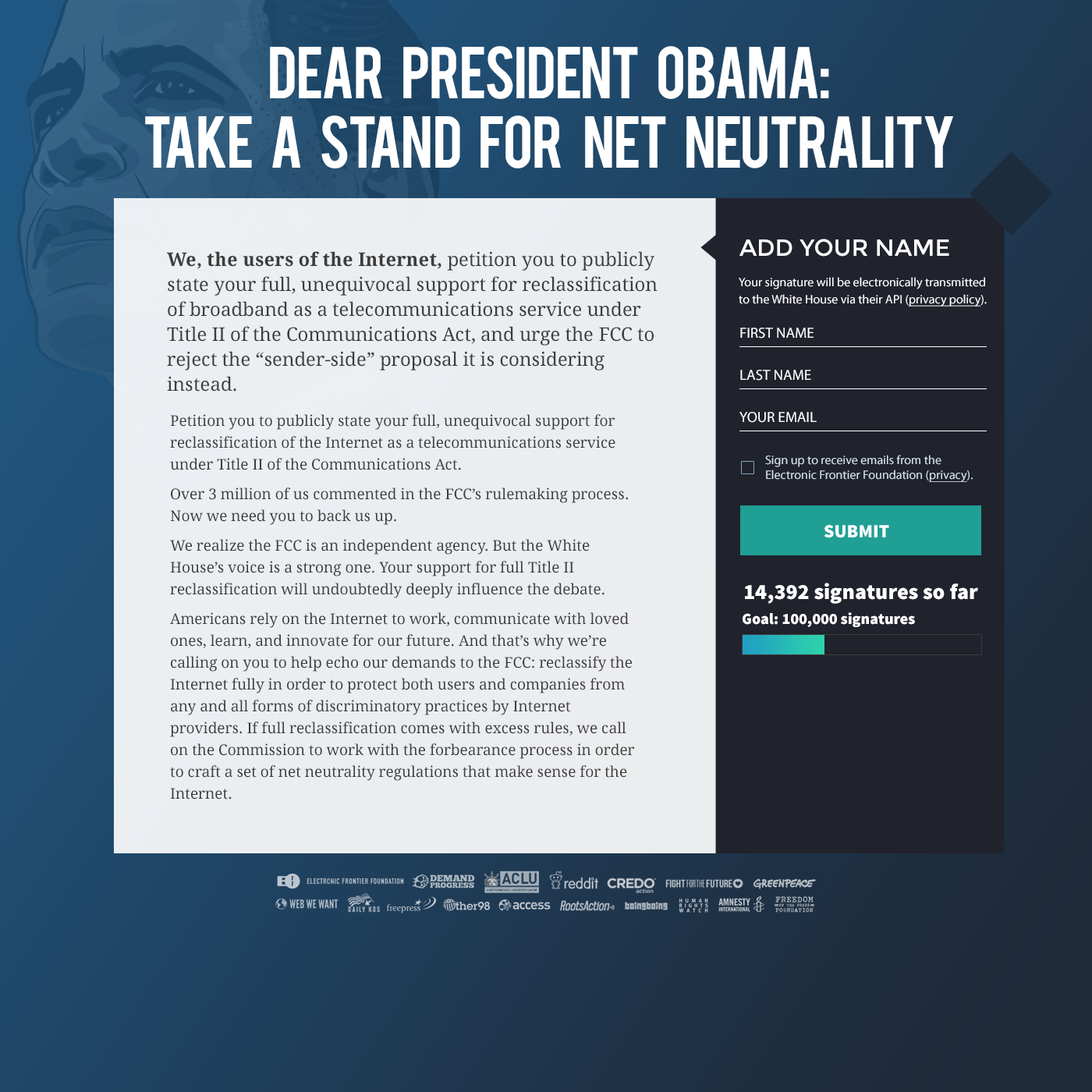
<style>
.page{position:relative;width:1092px;height:1092px}
.page>*{position:absolute;margin:0}
.t1{font:57.7px "Bebas";letter-spacing:-0.04em;color:#ffffff;text-transform:uppercase}
.t2{font:23.4px "Montserrat-Regular";color:#ffffff;text-transform:uppercase}
.t3{font:18.7px/25px "DroidSerif";color:#3d3d3d}
.t4{font:18.7px/25px "DroidSerif-Bold";color:#3d3d3d}
.t5{font:12.5px/17.2px "MyriadPro-Regular";color:#ffffff}
.t6{font:12.5px/17.2px "MyriadPro-Regular";color:#ffffff;text-decoration:underline}
.t7{font:14.8px "MyriadPro-Regular";color:#ffffff;text-transform:uppercase}
.t8{font:14.8px/21.8px "DroidSerif";color:#3d3d3d}
.t9{font:12.5px "MyriadPro-Regular";color:#d3e3ea}
.t10{font:12.5px "MyriadPro-Regular";color:#d3e3ea;text-decoration:underline}
.t11{font:18.7px "SourceSansPro-Black";color:#ffffff;text-transform:uppercase}
.t12{font:21.8px "SourceSansPro-Black";color:#ffffff}
.t13{font:15.6px "SourceSansPro-Black";color:#ffffff}
</style>
<div class="page">
<p class="t1" style="left:145px;top:46px;width:808px;height:122px;text-align:center">DeaR      PresidenT      obama:<br>TAKE      A      STAND      for       net      neutrality</p>
<p class="t2" style="left:739px;top:239px;width:210px;height:18px">ADD YOUR NAME</p>
<p class="t3" style="left:167px;top:251px;width:491px;height:141px"><span class="t4">We, the users of the Internet, </span>petition you to publicly state your full, unequivocal support for reclassification of broadband as a telecommunications service under Title II of the Communications Act, and urge the FCC to reject the “sender-side” proposal it is considering instead.</p>
<p class="t5" style="left:739px;top:277px;width:248px;height:30px">Your signature will be electronically transmitted <br>to the White House via their API (<span class="t6">privacy policy</span>).</p>
<p class="t7" style="left:740px;top:328px;width:74px;height:11px">First name</p>
<p class="t7" style="left:740px;top:370px;width:71px;height:11px">Last name</p>
<p class="t7" style="left:739px;top:412px;width:78px;height:11px">YOUR Email</p>
<p class="t8" style="left:170px;top:414px;width:465px;height:385px">Petition you to publicly state your full, unequivocal support for reclassification of the Internet as a telecommunications service under Title II of the Communications Act. <br>Over 3 million of us commented in the FCC’s rulemaking process. Now we need you to back us up. <br>We realize the FCC is an independent agency. But the White House’s voice is a strong one. Your support for full Title II reclassification will undoubtedly deeply influence the debate.<br>Americans rely on the Internet to work, communicate with loved ones, learn, and innovate for our future. And that’s why we’re calling on you to help echo our demands to the FCC: reclassify the Internet fully in order to protect both users and companies from any and all forms of discriminatory practices by Internet providers. If full reclassification comes with excess rules, we call on the Commission to work with the forbearance process in order to craft a set of net neutrality regulations that make sense for the Internet.</p>
<p class="t9" style="left:765px;top:455px;width:208px;height:27px">Sign up to receive emails from the Electronic Frontier Foundation (<span class="t10">privacy</span>).</p>
<p class="t11" style="left:824px;top:525px;width:65px;height:13px">Submit</p>
<p class="t12" style="left:745px;top:583px;width:233px;height:21px">14,392 signatures so far</p>
<p class="t13" style="left:743px;top:612px;width:172px;height:15px">Goal: 100,000 signatures</p>
</div>
